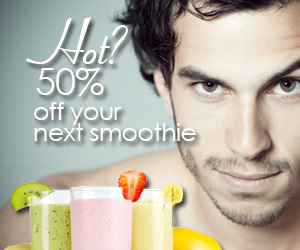
<style>
.page{position:relative;width:300px;height:250px}
.page>*{position:absolute;margin:0}
.t1{font:67.2px "Aspire-DemiBold";letter-spacing:-0.02em;color:#fffdfd}
.t2{font:37.5px "CenturyGothic";letter-spacing:-0.02em;color:#fffdfd}
.t3{font:25px "CenturyGothic";letter-spacing:-0.02em;color:#fffdfd}
.t4{font:12px "CenturyGothic";letter-spacing:-0.02em;color:#fffdfd}
</style>
<div class="page">
<p class="t1" style="left:25px;top:17px;width:103px;height:47px">Hot?</p>
<p class="t2" style="left:36px;top:68px;width:68px;height:28px">50%</p>
<p class="t3" style="left:34px;top:102px;width:88px;height:23px">off your</p>
<p class="t4" style="left:34px;top:123px;width:162px;height:18px">next smoothie</p>
</div>
